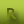
<style>
.page{position:relative;width:24px;height:24px}
.page>*{position:absolute;margin:0}
.t1{font:14px "Verdana";letter-spacing:-0.075em}
</style>
<div class="page">
<p class="t1" style="left:7px;top:8px;width:9px;height:11px">R</p>
<p class="t1" style="left:7px;top:8px;width:9px;height:11px">R</p>
</div>
